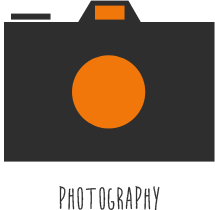
<style>
.page{position:relative;width:215px;height:210px;background:#2e2e2e}
.page>*{position:absolute;margin:0}
.t1{font:30px "Bite___Bullet";letter-spacing:0.01em;color:#2e2e2e}
</style>
<div class="page">
<p class="t1" style="left:59px;top:186px;width:101px;height:25px">photography</p>
</div>
